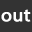
<style>
.page{position:relative;width:32px;height:32px;background:#333333}
.page>*{position:absolute;margin:0}
.t1{font:18px "MyriadPro-Regular";color:#ffffff;font-weight:bold;scale:1.1 1}
</style>
<div class="page">
<p class="t1" style="left:1px;top:9px;width:30px;height:13px">out</p>
</div>
